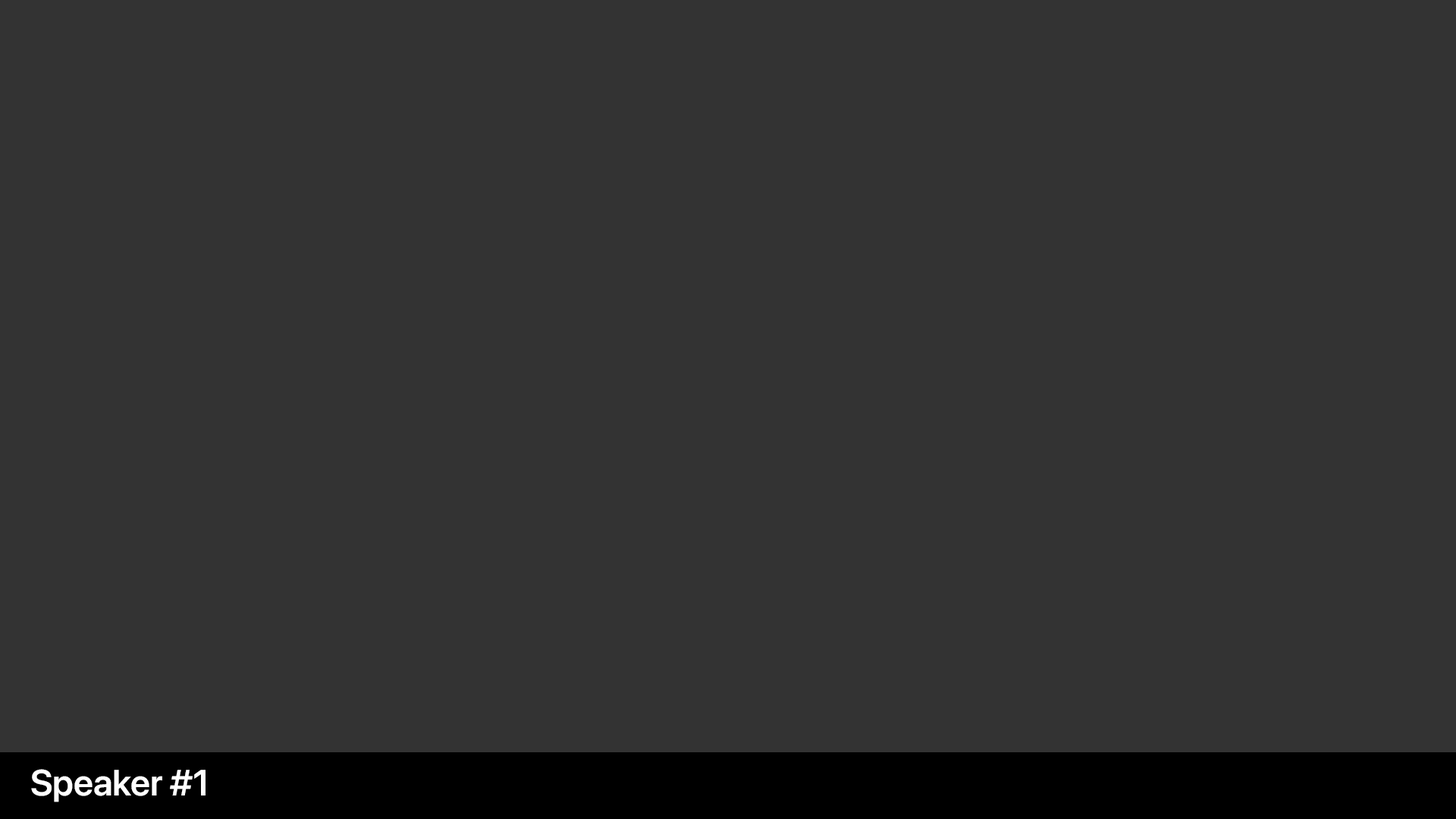
<style>
.page{position:relative;width:1456px;height:819px;background:#333333}
.page>*{position:absolute;margin:0}
.t1{font:36.4px "SFProDisplay-Semibold";color:#ffffff}
</style>
<div class="page">
<p class="t1" style="left:31px;top:769px;width:175px;height:33px">Speaker #1</p>
</div>
